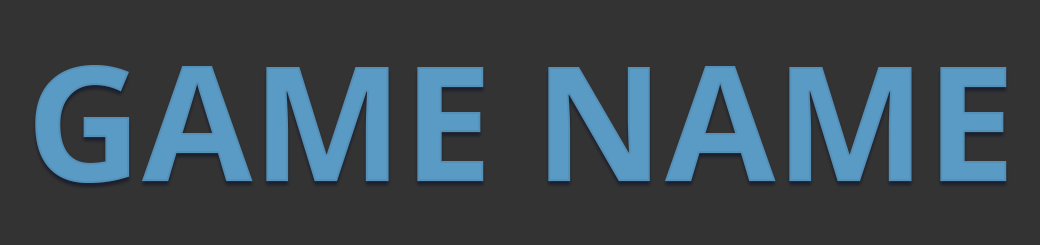
<style>
.page{position:relative;width:1040px;height:245px;background:#333333}
.page>*{position:absolute;margin:0}
.t1{font:160px "OpenSans-Bold";color:#5a9bc5}
</style>
<div class="page">
<p class="t1" style="left:35px;top:65px;width:972px;height:118px">GAME NAME</p>
</div>
